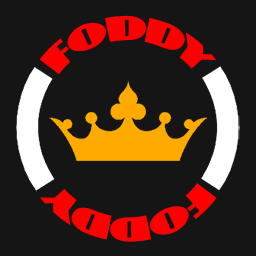
<style>
.page{position:relative;width:256px;height:256px;background:#151515}
.page>*{position:absolute;margin:0}
.t1{font:30.6px "PhattPhreddy";color:#ff0000}
</style>
<div class="page">
<p class="t1" style="left:39px;top:15px;width:177px;height:60px">FODDY</p>
<p class="t1" style="left:40px;top:183px;width:177px;height:59px;rotate:180deg">FODDY</p>
</div>
